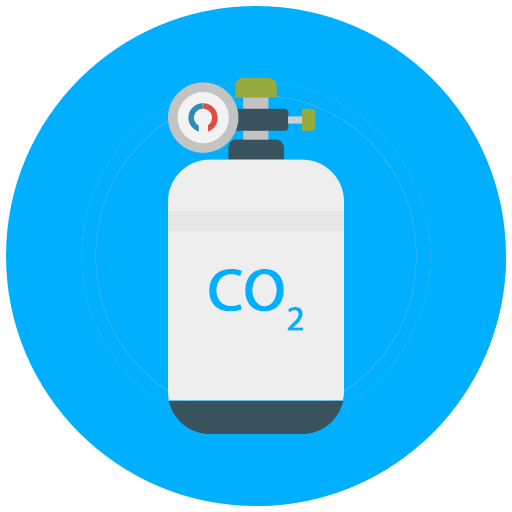
<style>
.page{position:relative;width:512px;height:512px;background:#00b0ff}
.page>*{position:absolute;margin:0}
.t1{font:60px "MyriadPro-Regular";color:#00b0ff;text-transform:uppercase;font-weight:bold}
</style>
<div class="page">
<p class="t1" style="left:209px;top:269px;width:94px;height:62px">CO2</p>
</div>
